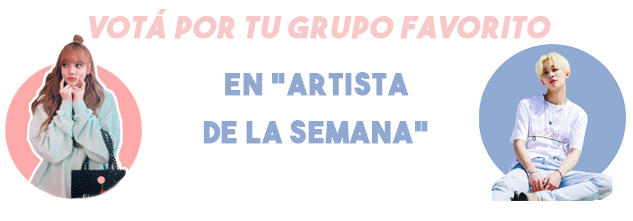
<style>
.page{position:relative;width:633px;height:221px;background:#ffffff}
.page>*{position:absolute;margin:0}
.t1{font:30px "TheBoldFont";letter-spacing:0.025em;color:#f7cac9;font-weight:bold;font-style:italic}
.t2{font:30px/48px "TheBoldFont";letter-spacing:0.025em;color:#91a8d1;font-weight:bold}
</style>
<div class="page">
<p class="t1" style="left:89px;top:9px;width:462px;height:30px">votá por tu grupo favorito</p>
<p class="t2" style="left:203px;top:72px;width:225px;height:72px;text-align:center">en “artista <br>de la semana”</p>
</div>
